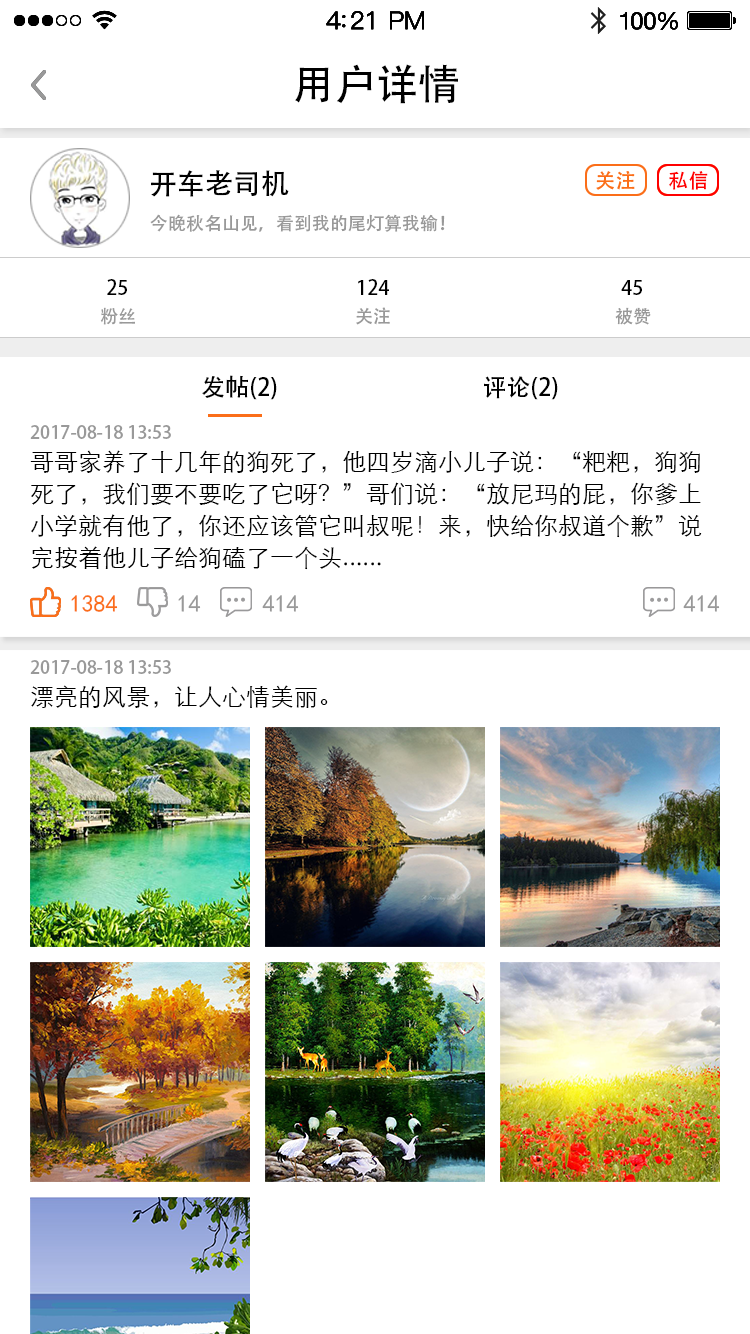
<style>
.page{position:relative;width:750px;height:1334px;background:#ffffff}
.page>*{position:absolute;margin:0}
.t1{font:42px "AdobeHeitiStd-Regular";color:#000000}
.t2{font:28px "AdobeHeitiStd-Regular";color:#000000}
.t3{font:20px "AdobeHeitiStd-Regular";color:#ff0000}
.t4{font:18px "AdobeHeitiStd-Regular";color:#999999}
.t5{font:20px "AdobeHeitiStd-Regular";color:#000000}
.t6{font:24px "AdobeHeitiStd-Regular";color:#000000}
.t7{font:24px/32px "STXihei";color:#000000}
.t8{font:24px "SimHei";color:#fb6e19}
.t9{font:24px "SimHei";color:#999999}
.t10{font:24px "STXihei";color:#000000}
</style>
<div class="page">
<p class="t1" style="left:295px;top:64px;width:163px;height:40px">用户详情</p>
<p class="t2" style="left:151px;top:170px;width:138px;height:27px">开车老司机</p>
<p class="t3" style="left:669px;top:171px;width:39px;height:19px">私信</p>
<p class="t4" style="left:150px;top:214px;width:295px;height:18px">今晚秋名山见，看到我的尾灯算我输！</p>
<p class="t5" style="left:107px;top:279px;width:20px;height:16px">25</p>
<p class="t5" style="left:358px;top:279px;width:31px;height:16px">124</p>
<p class="t5" style="left:621px;top:280px;width:21px;height:15px">45</p>
<p class="t4" style="left:100px;top:307px;width:35px;height:18px">粉丝</p>
<p class="t4" style="left:356px;top:307px;width:34px;height:18px">关注</p>
<p class="t4" style="left:615px;top:307px;width:36px;height:18px">被赞</p>
<p class="t6" style="left:202px;top:375px;width:75px;height:25px">发帖(2)</p>
<p class="t6" style="left:484px;top:376px;width:74px;height:24px">评论(2)</p>
<p class="t4" style="left:30px;top:425px;width:141px;height:14px">2017-08-18 13:53</p>
<p class="t7" style="left:30px;top:450px;width:672px;height:120px">哥哥家养了十几年的狗死了，他四岁滴小儿子说：“粑粑，狗狗<br>死了，我们要不要吃了它呀？”哥们说：“放尼玛的屁，你爹上<br>小学就有他了，你还应该管它叫叔呢！来，快给你叔道个歉”说<br>完按着他儿子给狗磕了一个头......</p>
<p class="t8" style="left:71px;top:595px;width:47px;height:17px">1384</p>
<p class="t9" style="left:178px;top:595px;width:23px;height:17px">14</p>
<p class="t9" style="left:262px;top:595px;width:37px;height:17px">414</p>
<p class="t9" style="left:683px;top:595px;width:37px;height:17px">414</p>
<p class="t4" style="left:30px;top:660px;width:141px;height:14px">2017-08-18 13:53</p>
<p class="t10" style="left:31px;top:685px;width:297px;height:23px">漂亮的风景，让人心情美丽。</p>
</div>
